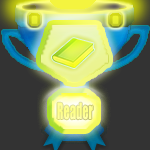
<style>
.page{position:relative;width:150px;height:150px;background:#333333}
.page>*{position:absolute;margin:0}
.t1{font:20.5px "Impact";color:#feff8f;scale:0.6 1}
</style>
<div class="page">
<p class="t1" style="left:57px;top:102px;width:36px;height:18px">Reader</p>
</div>
